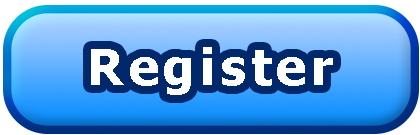
<style>
.page{position:relative;width:420px;height:135px}
.page>*{position:absolute;margin:0}
.t1{font:50px "Tahoma-Bold";letter-spacing:0.1em;color:#ffffff}
</style>
<div class="page">
<p class="t1" style="left:91px;top:47px;width:242px;height:48px">Register</p>
</div>
